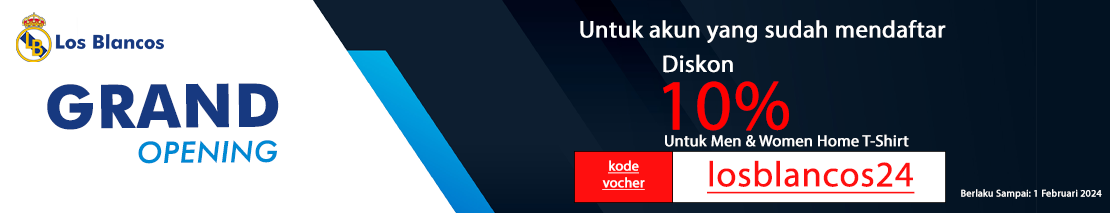
<style>
.page{position:relative;width:1110px;height:213px;background:#ffffff}
.page>*{position:absolute;margin:0}
.t1{font:24px "MyriadPro-Regular";color:#ffffff;font-weight:bold}
.t2{font:16px/2.4px "MyriadPro-Regular";color:#fefefe;font-weight:bold}
.t3{font:24px/2.4px "MyriadPro-Regular";color:#ffffff;font-weight:bold}
.t4{font:72px/2.4px "MyriadPro-Regular";color:#ff0000;font-weight:bold}
.t5{font:29.5px/2.9px "FuturaBT-MediumItalic";color:#008ad3;font-weight:bold}
.t6{font:60px/2.9px "FuturaBT-Bold";color:#173980;font-weight:bold}
.t7{font:14px/2.4px "MyriadPro-Regular";color:#fefefe;font-weight:bold;text-decoration:underline}
.t8{font:36px "MyriadPro-Regular";color:#ff0f0f;font-weight:bold;text-decoration:underline}
.t9{font:10px "MyriadPro-Regular";color:#ffffff;font-weight:bold}
</style>
<div class="page">
<p class="t1" style="left:580px;top:20px;width:366px;height:23px">Untuk akun yang sudah mendaftar</p>
<p class="t2" style="left:663px;top:54px;width:246px;height:93px"><span class="t3">          Diskon<br><br><br><br><br><br><br><br> <br><br><br><br><br><br><br><br><br>    <br></span><span class="t4"><br><br><br><br><br><br>  10%<br><br><br><br><br>               <br></span>    Untuk Men &amp; Women Home T-Shirt</p>
<p class="t5" style="left:47px;top:83px;width:232px;height:81px;text-align:center"><span class="t6">GRAND <br><br><br><br><br><br><br><br><br><br><br><br>  </span>OPENING</p>
<p class="t7" style="left:602px;top:160px;width:43px;height:30px;text-align:center">kode<br><br><br><br><br><br><br>vocher</p>
<p class="t8" style="left:707px;top:160px;width:208px;height:34px">losblancos24</p>
<p class="t9" style="left:961px;top:189px;width:141px;height:10px">Berlaku Sampai: 1 Februari 2024</p>
</div>
